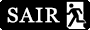
<style>
.page{position:relative;width:90px;height:30px;background:#000000}
.page>*{position:absolute;margin:0}
.t1{font:20.4px "Georgia";letter-spacing:0.06em;color:#ffffff}
</style>
<div class="page">
<p class="t1" style="left:7px;top:7px;width:53px;height:16px">SAIR</p>
</div>
